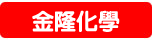
<style>
.page{position:relative;width:153px;height:41px;background:#fe0000}
.page>*{position:absolute;margin:0}
.t1{font:22px "YenRound-Ultra";color:#ffffff}
</style>
<div class="page">
<p class="t1" style="left:32px;top:10px;width:88px;height:22px">金隆化學</p>
</div>
